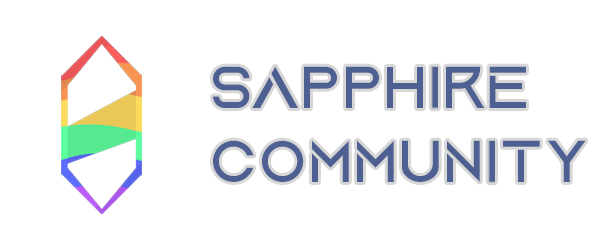
<style>
.page{position:relative;width:600px;height:250px;background:#ffffff}
.page>*{position:absolute;margin:0}
.t1{font:62px "AquireRegular";letter-spacing:0.04em;color:#4e5f92}
</style>
<div class="page">
<p class="t1" style="left:213px;top:66px;width:373px;height:117px">sapphire<br>community</p>
</div>
